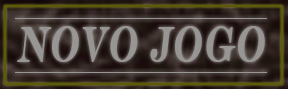
<style>
.page{position:relative;width:288px;height:89px}
.page>*{position:absolute;margin:0}
.t1{font:49.8px "EngraversMT";color:#989595;font-weight:bold;font-style:italic;scale:0.62 1}
</style>
<div class="page">
<p class="t1" style="left:17px;top:26px;width:248px;height:36px">NOVO JOGO</p>
</div>
